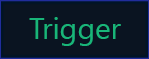
<style>
.page{position:relative;width:149px;height:59px;background:#0a1421}
.page>*{position:absolute;margin:0}
.t1{font:30px "SegoeUISymbol";color:#19b579}
</style>
<div class="page">
<p class="t1" style="left:29px;top:17px;width:92px;height:29px">Trigger</p>
</div>
